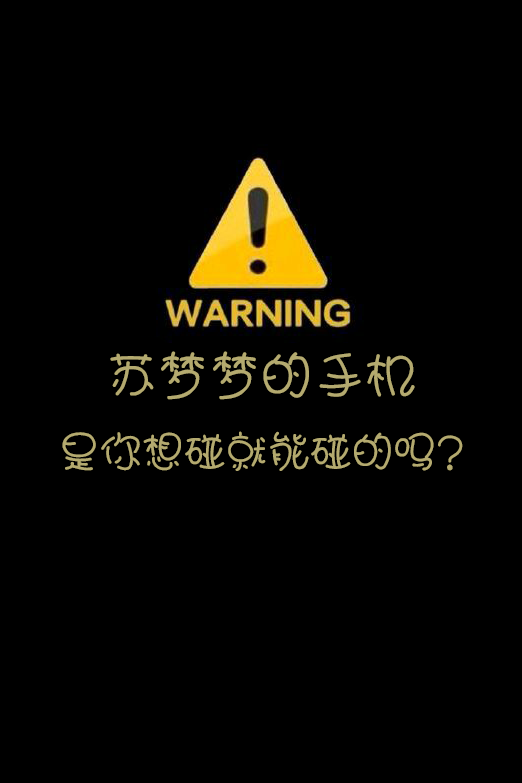
<style>
.page{position:relative;width:522px;height:783px;background:#000000}
.page>*{position:absolute;margin:0}
.t1{font:52px "JWaWAZuan";color:#b4aa6f}
.t2{font:42px "JWaWAZuan";color:#b4aa6f}
</style>
<div class="page">
<p class="t1" style="left:110px;top:351px;width:305px;height:49px">苏梦梦的手机</p>
<p class="t2" style="left:62px;top:431px;width:401px;height:40px">是你想碰就能碰的吗？</p>
</div>
